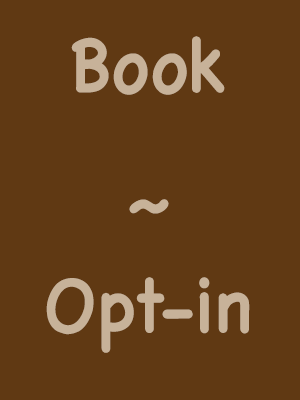
<style>
.page{position:relative;width:300px;height:400px;background:#603913}
.page>*{position:absolute;margin:0}
.t1{font:75.6px/80px "Chalkboard";letter-spacing:-0.01em;color:#c7b299;font-weight:bold;scale:0.95 1}
</style>
<div class="page">
<p class="t1" style="left:46px;top:36px;width:204px;height:317px;text-align:center">Book<br><br>~<br>Opt-in</p>
</div>
